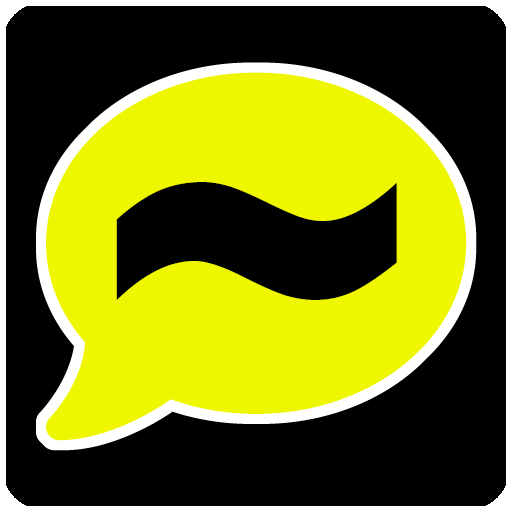
<style>
.page{position:relative;width:512px;height:512px;background:#000000}
.page>*{position:absolute;margin:0}
.t1{font:500px "Arial-Black";color:#000000}
</style>
<div class="page">
<p class="t1" style="left:116px;top:182px;width:281px;height:118px">~</p>
</div>
